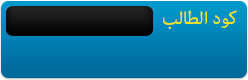
<style>
.page{position:relative;width:248px;height:80px}
.page>*{position:absolute;margin:0}
.t1{font:25px "AdobeArabic-Regular";color:#f9eb06}
</style>
<div class="page">
<p class="t1" style="left:163px;top:10px;width:74px;height:20px">كود الطالب</p>
</div>
